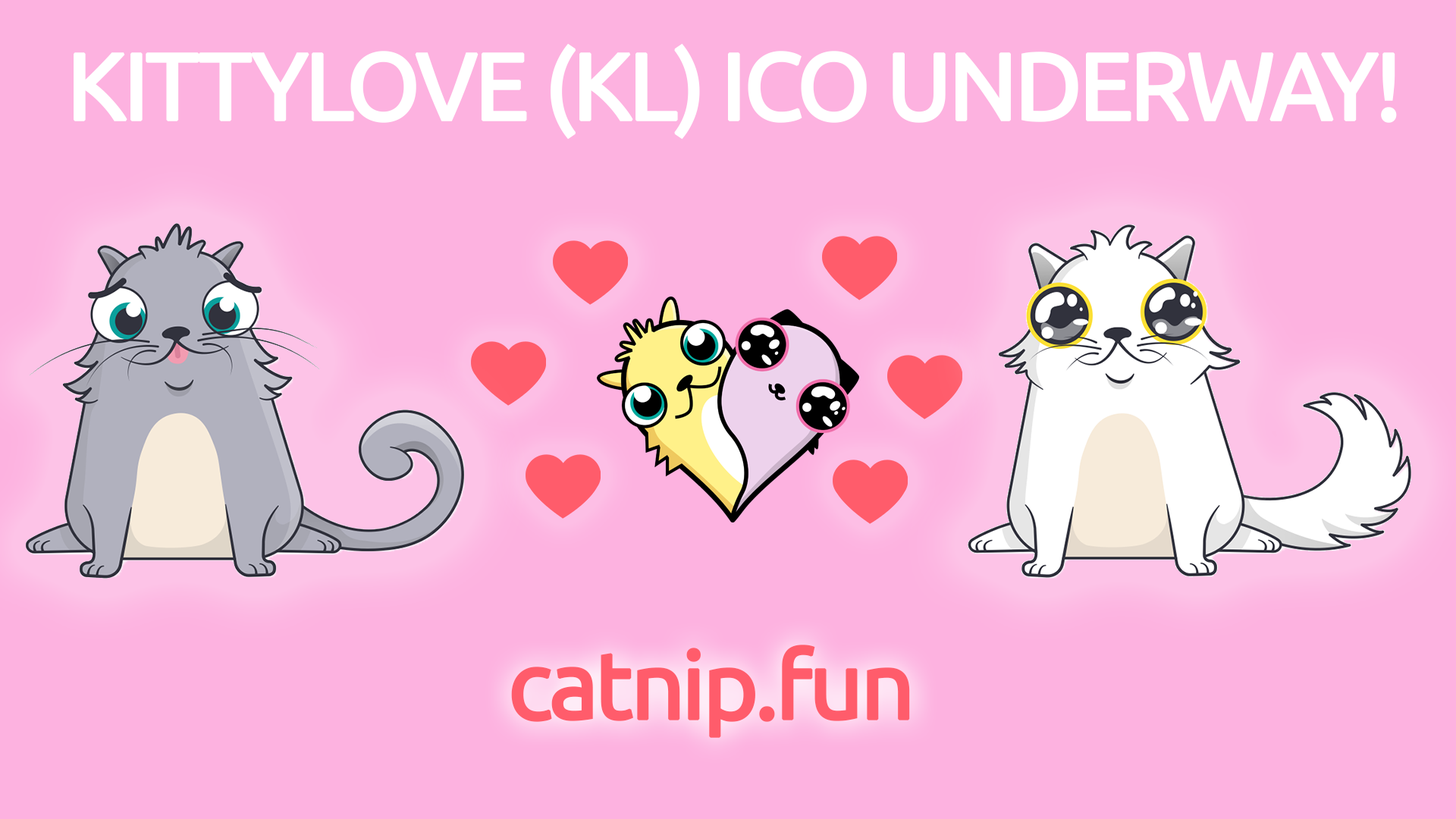
<style>
.page{position:relative;width:1456px;height:819px;background:#fdb2e0}
.page>*{position:absolute;margin:0}
.t1{font:94.8px "Ubuntu";letter-spacing:-0.06em;color:#ffffff;font-weight:bold}
.t2{font:94.8px "Ubuntu";letter-spacing:-0.06em;color:#ff5c6b;font-weight:bold}
</style>
<div class="page">
<p class="t1" style="left:74px;top:43px;width:1323px;height:97px">KITTYLOVE (KL) ICO UNDERWAY!</p>
<p class="t2" style="left:511px;top:645px;width:399px;height:93px">catnip.fun</p>
</div>
